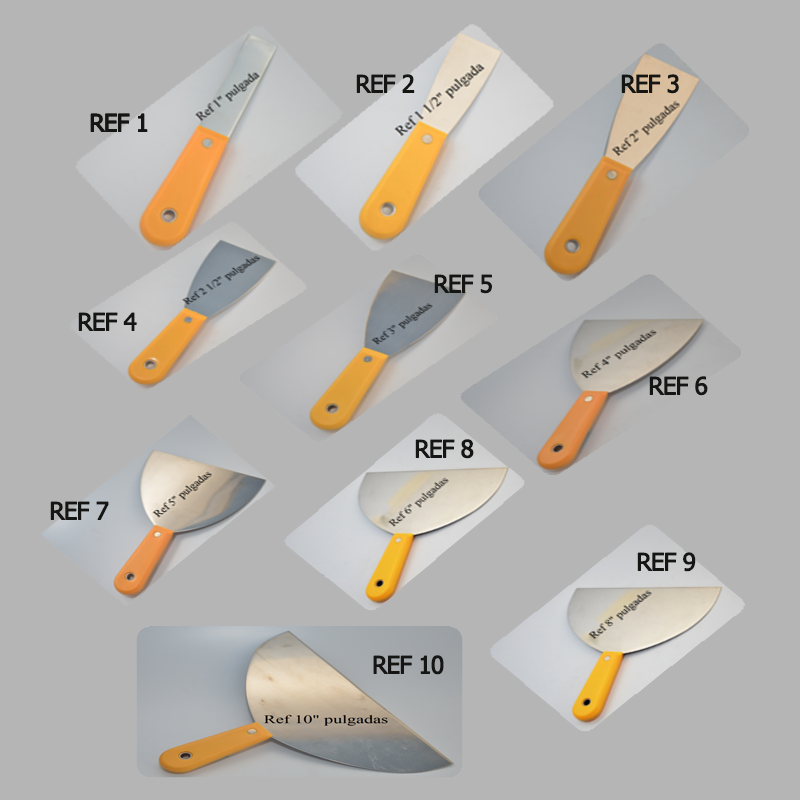
<style>
.page{position:relative;width:800px;height:800px;background:#b5b5b5}
.page>*{position:absolute;margin:0}
.t1{font:24px "Tahoma";letter-spacing:-0.05em;color:#151514;font-weight:bold}
</style>
<div class="page">
<p class="t1" style="left:356px;top:74px;width:59px;height:19px">REF 2</p>
<p class="t1" style="left:621px;top:74px;width:58px;height:20px">REF 3</p>
<p class="t1" style="left:90px;top:113px;width:58px;height:19px">REF 1</p>
<p class="t1" style="left:90px;top:113px;width:58px;height:19px">REF 1</p>
<p class="t1" style="left:434px;top:274px;width:58px;height:20px">REF 5</p>
<p class="t1" style="left:78px;top:312px;width:59px;height:19px">REF 4</p>
<p class="t1" style="left:649px;top:376px;width:59px;height:20px">REF 6</p>
<p class="t1" style="left:415px;top:439px;width:59px;height:20px">REF 8</p>
<p class="t1" style="left:50px;top:501px;width:59px;height:19px">REF 7</p>
<p class="t1" style="left:637px;top:552px;width:59px;height:20px">REF 9</p>
<p class="t1" style="left:373px;top:655px;width:71px;height:20px">REF 10</p>
</div>
